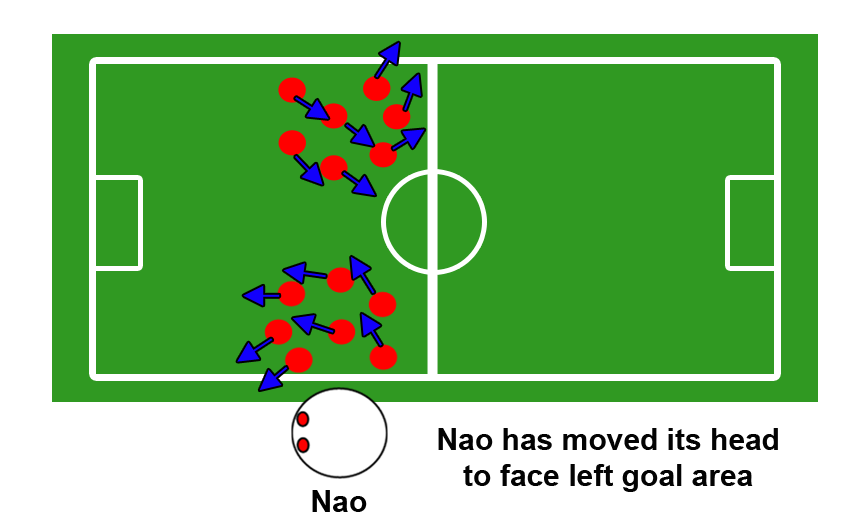
<style>
.page{position:relative;width:854px;height:526px;background:#309922}
.page>*{position:absolute;margin:0}
.t1{font:30px "Arial-BoldMT";color:#030303}
.t2{font:30px "Arial-BoldMT";color:#000000}
</style>
<div class="page">
<p class="t1" style="left:438px;top:428px;width:340px;height:64px;text-align:center">Nao has moved its head<br>to face left goal area</p>
<p class="t2" style="left:312px;top:490px;width:55px;height:22px">Nao</p>
</div>
